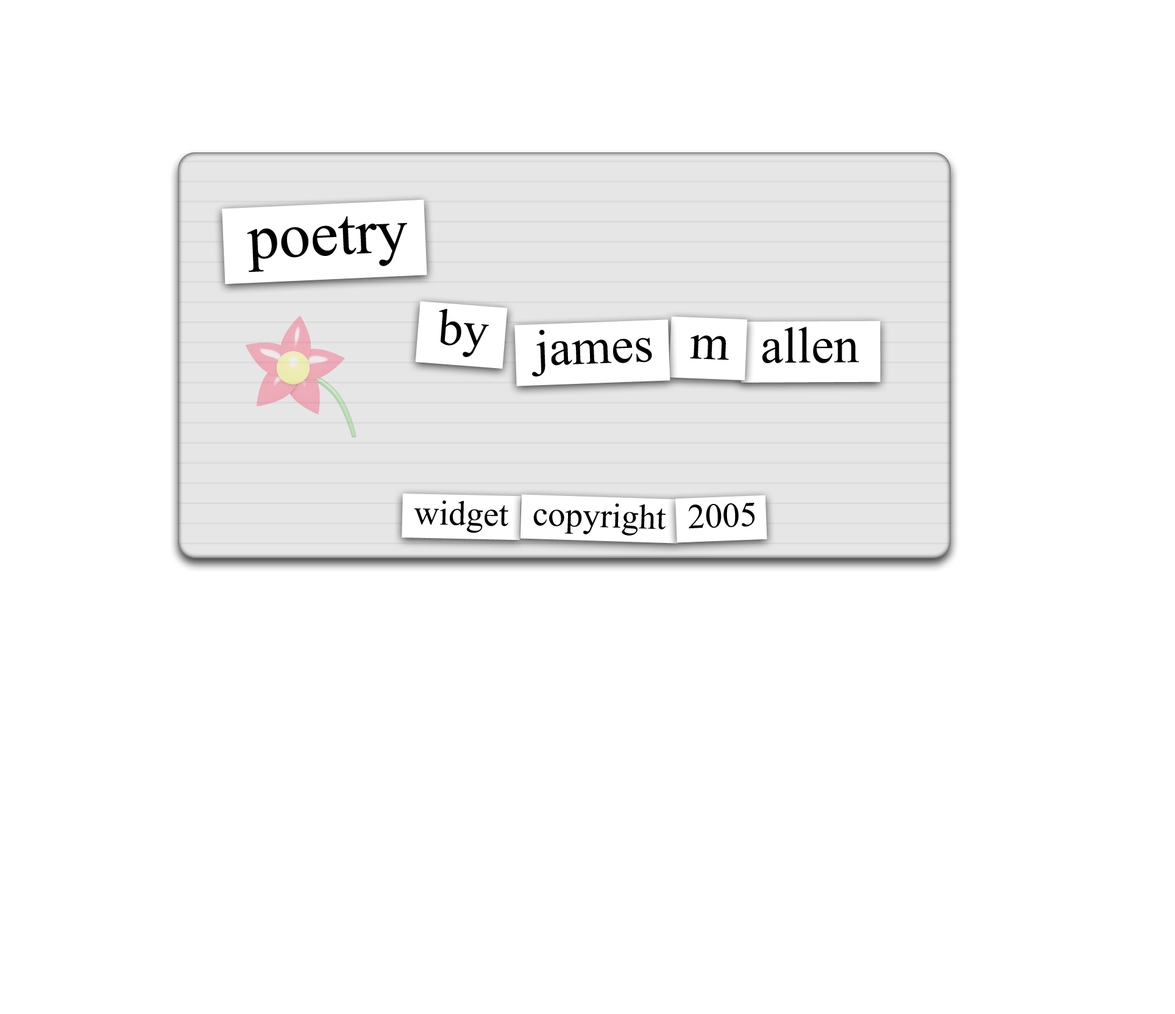
<style>
.page{position:relative;width:1175px;height:1014px;background:#ffffff}
.page>*{position:absolute;margin:0}
.t1{font:63.1px "TimesNewRomanPSMT";color:#000000}
.t2{font:51px "TimesNewRomanPSMT";color:#000000}
.t3{font:34.7px "TimesNewRomanPSMT";color:#000000}
</style>
<div class="page">
<p class="t1" style="left:247px;top:216px;width:160px;height:57px;rotate:-3deg">poetry</p>
<p class="t2" style="left:439px;top:308px;width:50px;height:49px;rotate:4deg">by</p>
<p class="t2" style="left:532px;top:330px;width:120px;height:47px;rotate:-2deg">james</p>
<p class="t2" style="left:763px;top:327px;width:97px;height:36px">allen</p>
<p class="t2" style="left:690px;top:335px;width:39px;height:25px;rotate:2deg">m</p>
<p class="t3" style="left:415px;top:501px;width:93px;height:32px;rotate:1deg">widget</p>
<p class="t3" style="left:533px;top:504px;width:133px;height:32px;rotate:2deg">copyright</p>
<p class="t3" style="left:689px;top:503px;width:66px;height:26px;rotate:-2deg">2005</p>
</div>
